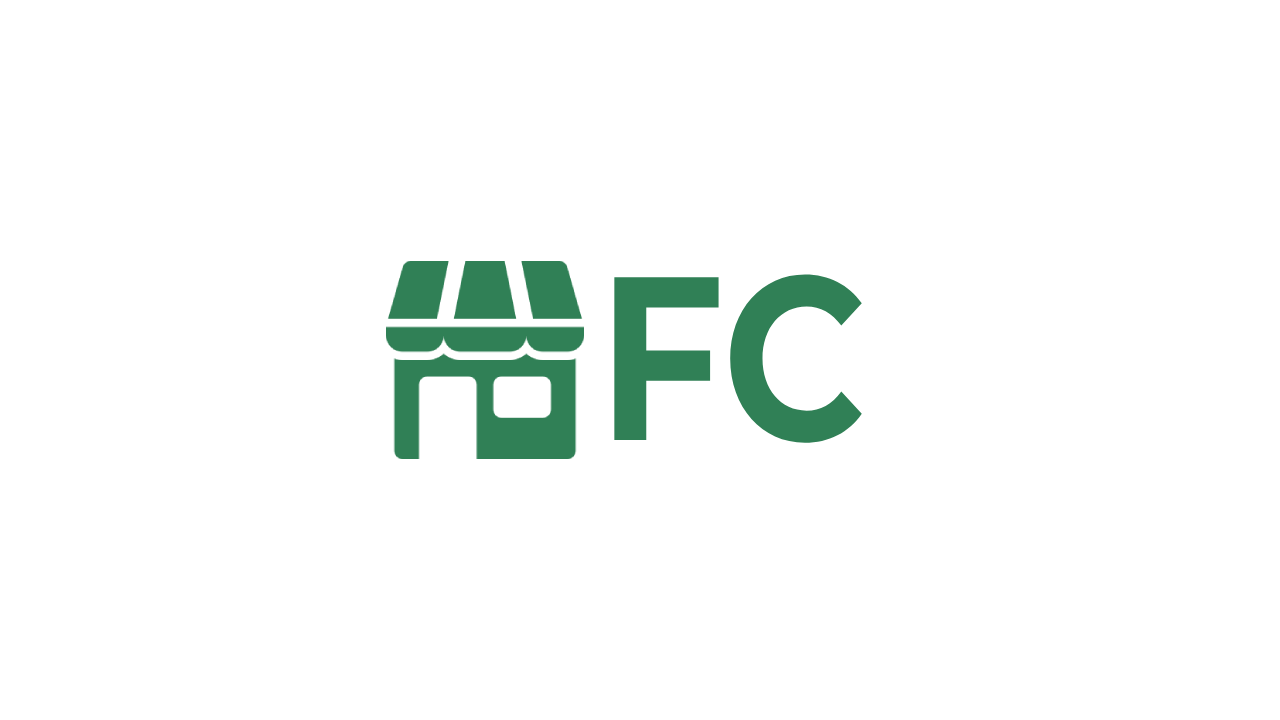
<style>
.page{position:relative;width:1280px;height:720px;background:#ffffff}
.page>*{position:absolute;margin:0}
.t1{font:232.6px "Montserrat-Bold";color:#308056;scale:0.85 1}
</style>
<div class="page">
<p class="t1" style="left:614px;top:274px;width:248px;height:169px">FC</p>
</div>
